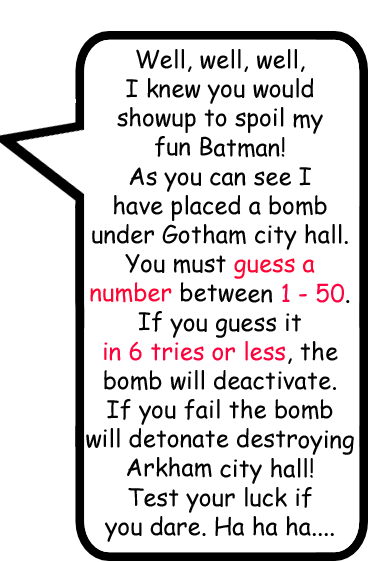
<style>
.page{position:relative;width:370px;height:562px;background:#ffffff}
.page>*{position:absolute;margin:0}
.t1{font:24.3px "ComicSansMS";color:#030303}
.t2{font:24.3px "ComicSansMS";color:#fd0633}
.t3{font:24.3px "ComicSansMS";color:#fc0341}
.t4{font:24.3px "ComicSansMS";color:#fc033d}
</style>
<div class="page">
<p class="t1" style="left:86px;top:49px;width:268px;height:493px;text-align:center">Well, well, well,<br>I knew you would<br>showup to spoil my<br>fun Batman!<br>As you can see I<br>have placed a bomb<br>under Gotham city hall.<br>You must <span class="t2">guess a<br>number</span> between <span class="t3">1 - 50</span>.<br>If you guess it<br><span class="t4">in 6 tries or less</span>, the<br>bomb will deactivate.<br>If you fail the bomb<br>will detonate destroying<br>Arkham city hall!<br>Test your luck if<br>you dare. Ha ha ha....</p>
</div>
